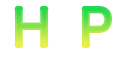
<style>
.page{position:relative;width:128px;height:64px;background:#ffffff}
.page>*{position:absolute;margin:0}
.t1{font:48px "HiraKakuProN-W3"}
</style>
<div class="page">
<p class="t1" style="left:16px;top:8px;width:31px;height:38px">H</p>
<p class="t1" style="left:83px;top:8px;width:27px;height:38px">P</p>
</div>
